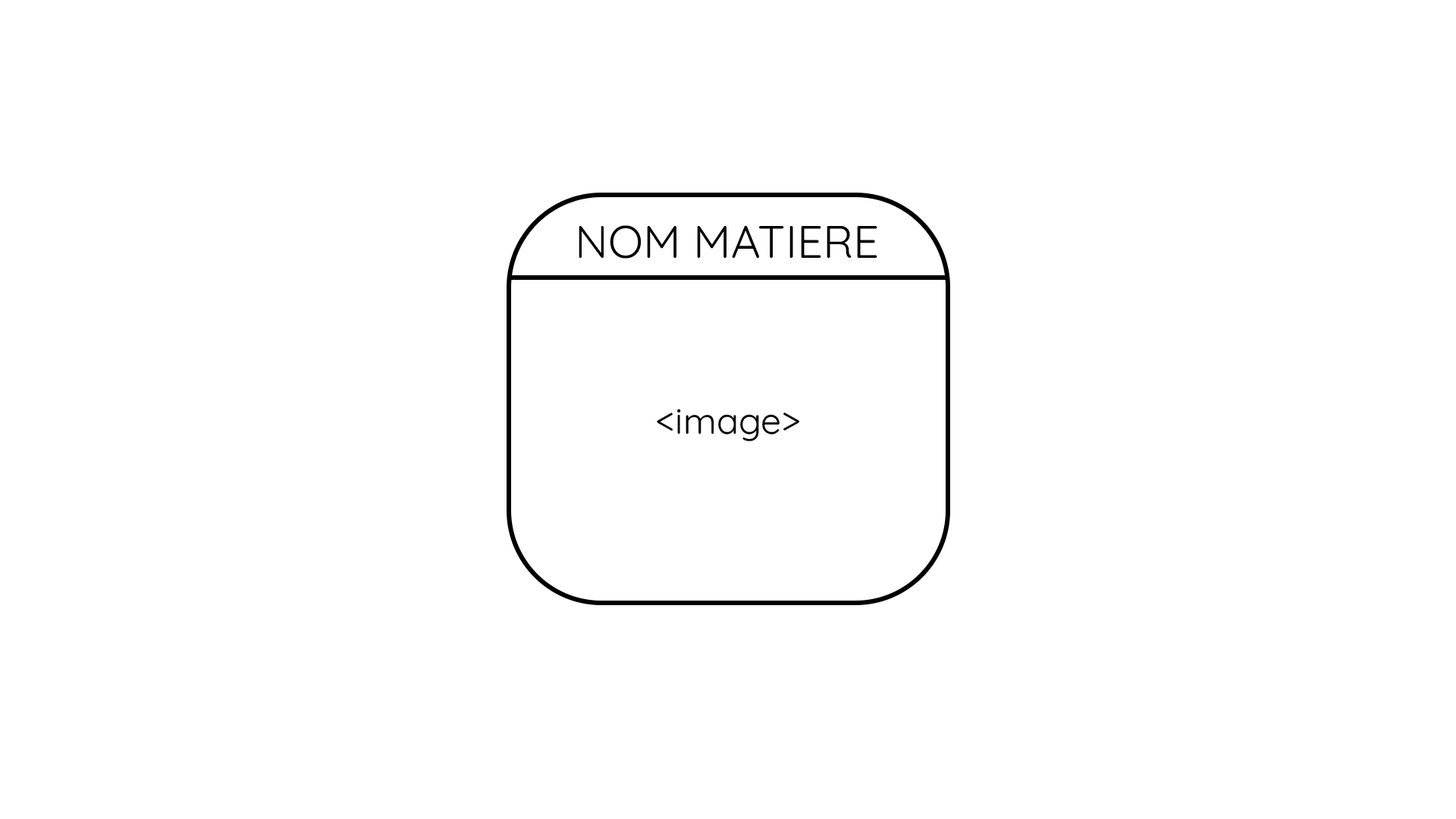
<style>
.page{position:relative;width:1456px;height:819px;background:#ffffff}
.page>*{position:absolute;margin:0}
.t1{font:45.5px "Quicksand-Regular";color:#000000}
.t2{font:36.4px "Quicksand-Regular";color:#000000}
</style>
<div class="page">
<p class="t1" style="left:579px;top:225px;width:298px;height:34px">NOM MATIERE</p>
<p class="t2" style="left:657px;top:409px;width:142px;height:32px">&lt;image&gt;</p>
</div>
